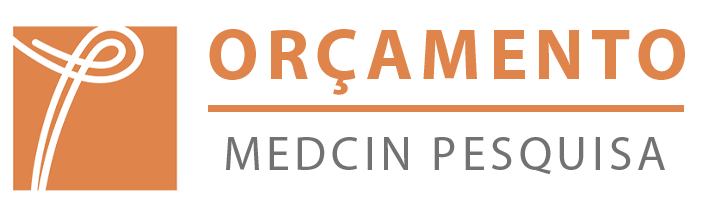
<style>
.page{position:relative;width:720px;height:213px;background:#ffffff}
.page>*{position:absolute;margin:0}
.t1{font:72px "MyriadPro-Bold";letter-spacing:0.1em;color:#df844a}
.t2{font:48px "MyriadPro-Regular";letter-spacing:0.1em;color:#737272}
</style>
<div class="page">
<p class="t1" style="left:209px;top:29px;width:476px;height:66px">ORÇAMENTO</p>
<p class="t2" style="left:226px;top:137px;width:439px;height:38px">MEDCIN PESQUISA</p>
</div>
